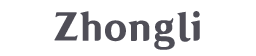
<style>
.page{position:relative;width:256px;height:56px;background:#ffffff}
.page>*{position:absolute;margin:0}
.t1{font:36px "HYWenHei-HEW";color:#4f4e57}
</style>
<div class="page">
<p class="t1" style="left:54px;top:11px;width:146px;height:39px">Zhongli</p>
</div>
